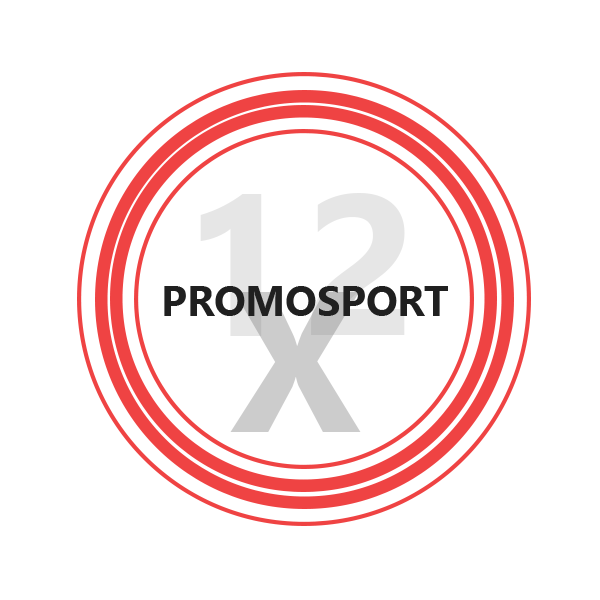
<style>
.page{position:relative;width:600px;height:600px;background:#ffffff}
.page>*{position:absolute;margin:0}
.t1{font:41.7px "NirmalaUI-Bold";color:#202020}
.t2{font:200px "NirmalaUI-Bold";color:#cccccc}
</style>
<div class="page">
<p class="t1" style="left:164px;top:286px;width:284px;height:30px">PROMOSPORT</p>
<p class="t2" style="left:230px;top:292px;width:131px;height:140px">X</p>
</div>
